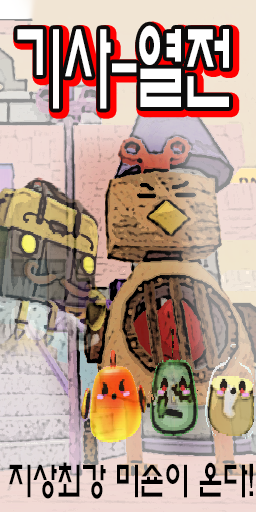
<style>
.page{position:relative;width:256px;height:512px}
.page>*{position:absolute;margin:0}
.t1{font:96.6px "ExpoM-HM";letter-spacing:-0.02em;color:#ffffff;scale:0.51 1}
.t2{font:39.7px "ExpoM-HM";letter-spacing:-0.02em;color:#000000;scale:0.63 1}
</style>
<div class="page">
<p class="t1" style="left:17px;top:25px;width:212px;height:84px">기사-열전</p>
<p class="t2" style="left:9px;top:462px;width:244px;height:37px">지상최강 미숀이 온다!</p>
</div>
